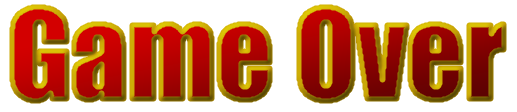
<style>
.page{position:relative;width:517px;height:112px;background:#ffffff}
.page>*{position:absolute;margin:0}
.t1{font:114px "Impact"}
</style>
<div class="page">
<p class="t1" style="left:12px;top:7px;width:492px;height:94px">Game Over</p>
</div>
